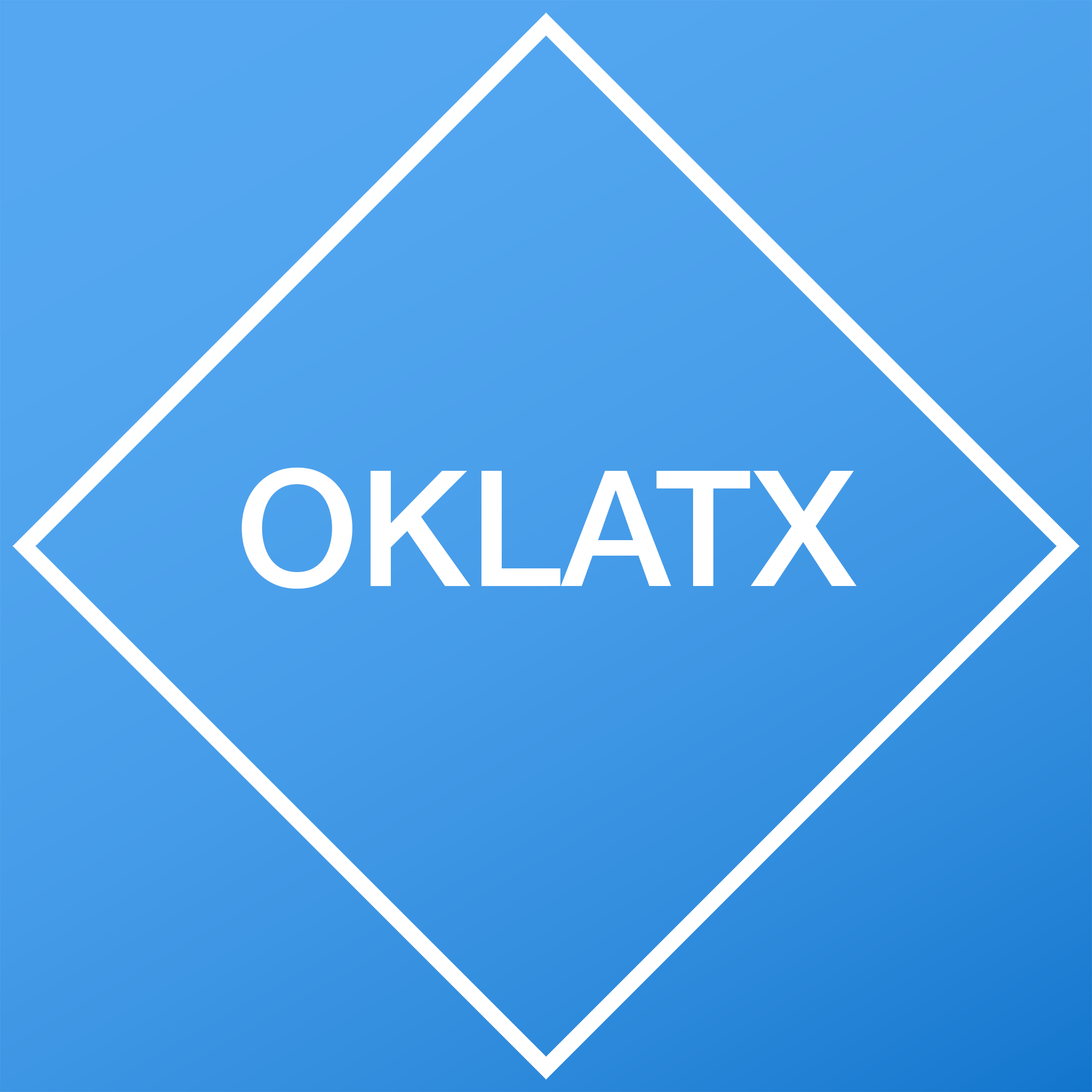
<style>
.page{position:relative;width:1092px;height:1092px}
.page>*{position:absolute;margin:0}
.t1{font:161.8px "HelveticaNeue-Medium";color:#ffffff}
</style>
<div class="page">
<p class="t1" style="left:242px;top:468px;width:615px;height:121px">OKLATX</p>
</div>
